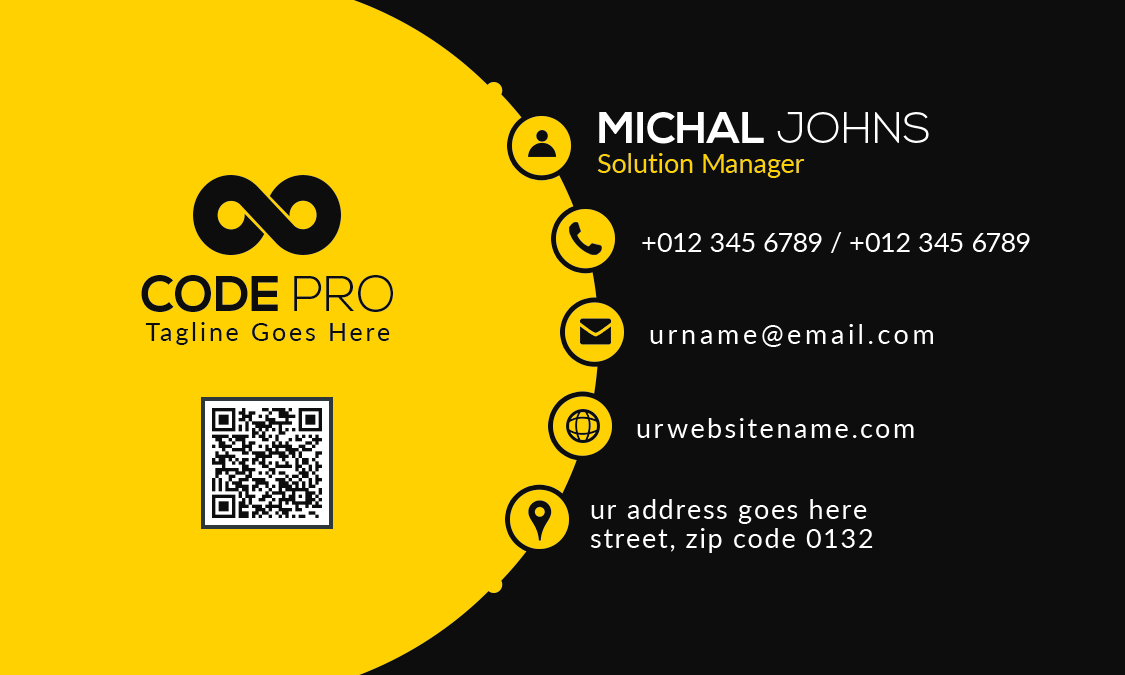
<style>
.page{position:relative;width:1125px;height:675px;background:#0d0d0d}
.page>*{position:absolute;margin:0}
.t1{font:43.7px "NexaBold";color:#ffffff;text-transform:uppercase}
.t2{font:43.7px "NexaLight";color:#ffffff;text-transform:uppercase}
.t3{font:26.8px "Lato-Regular";color:#ffd100}
.t4{font:27.1px "Lato-Regular";color:#ffffff}
.t5{font:50px "NexaBold";color:#0d0d0d}
.t6{font:50px "NexaLight";color:#0d0d0d}
.t7{font:25px "Lato-Regular";letter-spacing:0.12em;color:#0d0d0d}
.t8{font:27.1px "Lato-Regular";letter-spacing:0.14em;color:#ffffff}
.t9{font:27.1px "Lato-Regular";letter-spacing:0.1em;color:#ffffff}
.t10{font:27.1px/29.2px "Lato-Regular";letter-spacing:0.06em;color:#ffffff}
</style>
<div class="page">
<p class="t1" style="left:599px;top:112px;width:330px;height:32px">MICHAL <span class="t2">JOHNS</span></p>
<p class="t3" style="left:597px;top:153px;width:208px;height:25px">Solution Manager</p>
<p class="t4" style="left:642px;top:232px;width:388px;height:21px">+012 345 6789 / +012 345 6789</p>
<p class="t5" style="left:141px;top:275px;width:252px;height:37px">CODE <span class="t6">PRO</span></p>
<p class="t7" style="left:145px;top:322px;width:245px;height:23px">Tagline Goes Here</p>
<p class="t8" style="left:650px;top:324px;width:283px;height:23px">urname@email.com</p>
<p class="t9" style="left:637px;top:418px;width:277px;height:20px">urwebsitename.com</p>
<p class="t10" style="left:590px;top:499px;width:283px;height:54px">ur address goes here<br>street, zip code 0132</p>
</div>
